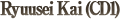
<style>
.page{position:relative;width:121px;height:19px;background:#ffffff}
.page>*{position:absolute;margin:0}
.t1{font:18px "RyuminPro-ExBold";letter-spacing:-0.1em;color:#4a3f32;font-weight:bold;scale:0.9 1}
</style>
<div class="page">
<p class="t1" style="left:0px;top:1px;width:120px;height:18px">Ryuusei Kai (CD1)</p>
</div>
